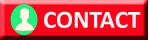
<style>
.page{position:relative;width:150px;height:40px;background:#f8051c}
.page>*{position:absolute;margin:0}
.t1{font:25px "Calibri-Bold";color:#f9f2f3}
</style>
<div class="page">
<p class="t1" style="left:44px;top:11px;width:97px;height:17px">CONTACT</p>
</div>
